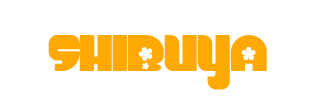
<style>
.page{position:relative;width:320px;height:100px;background:#ffffff}
.page>*{position:absolute;margin:0}
.t1{font:72px "Chick";color:#ffa904}
</style>
<div class="page">
<p class="t1" style="left:48px;top:35px;width:219px;height:55px">SHIBUYA</p>
</div>
